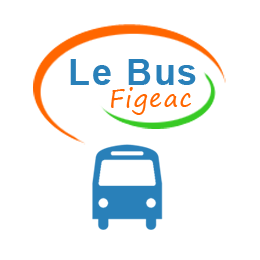
<style>
.page{position:relative;width:260px;height:260px;background:#ffffff}
.page>*{position:absolute;margin:0}
.t1{font:36px "Arial-BoldMT";letter-spacing:0.05em;color:#2980b9}
.t2{font:25.2px "SegoePrint";letter-spacing:0.05em;color:#ff6600}
</style>
<div class="page">
<p class="t1" style="left:70px;top:59px;width:126px;height:26px">Le Bus</p>
<p class="t2" style="left:111px;top:87px;width:80px;height:28px">Figeac</p>
</div>
